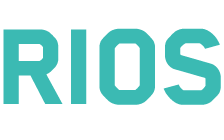
<style>
.page{position:relative;width:224px;height:140px;background:#ffffff}
.page>*{position:absolute;margin:0}
.t1{font:124px "Blender-Heavy";letter-spacing:-0.025em;color:#3bbab3}
</style>
<div class="page">
<p class="t1" style="left:3px;top:28px;width:218px;height:77px">Rios</p>
</div>
